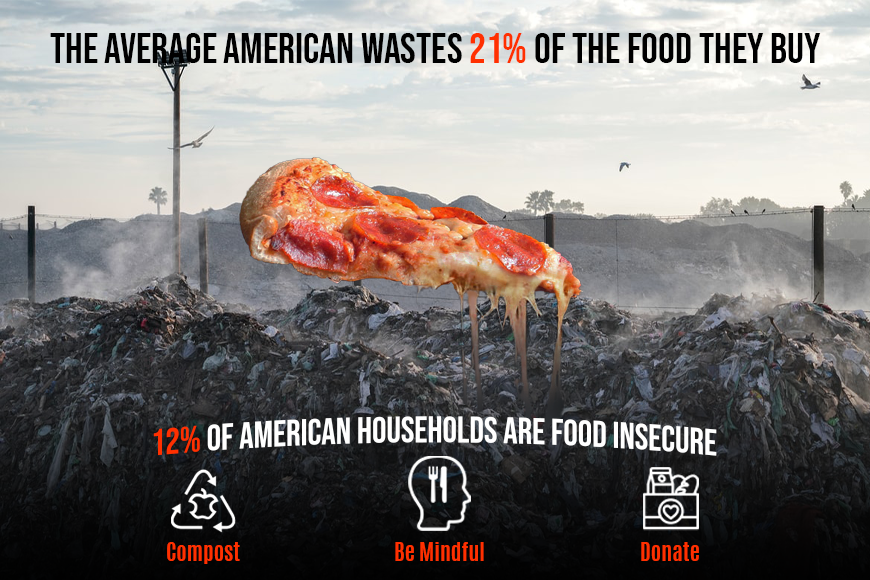
<style>
.page{position:relative;width:870px;height:580px}
.page>*{position:absolute;margin:0}
.t1{font:42px "BebasNeue-Regular";color:#000000}
.t2{font:42px "BebasNeue-Regular";color:#ff3000}
.t3{font:36px "BebasNeue-Regular";color:#ffffff}
.t4{font:36px "BebasNeue-Regular";color:#ff3000}
.t5{font:22px "Antonio-Bold";color:#ff3000}
</style>
<div class="page">
<p class="t1" style="left:50px;top:33px;width:771px;height:30px">the average american wastes <span class="t2">21% </span>of the food they buy</p>
<p class="t3" style="left:153px;top:416px;width:564px;height:40px"><span class="t4">12%</span> of American households are food insecure</p>
<p class="t5" style="left:167px;top:542px;width:73px;height:22px">Compost</p>
<p class="t5" style="left:395px;top:542px;width:89px;height:19px">Be Mindful</p>
<p class="t5" style="left:641px;top:542px;width:58px;height:19px">Donate</p>
</div>
